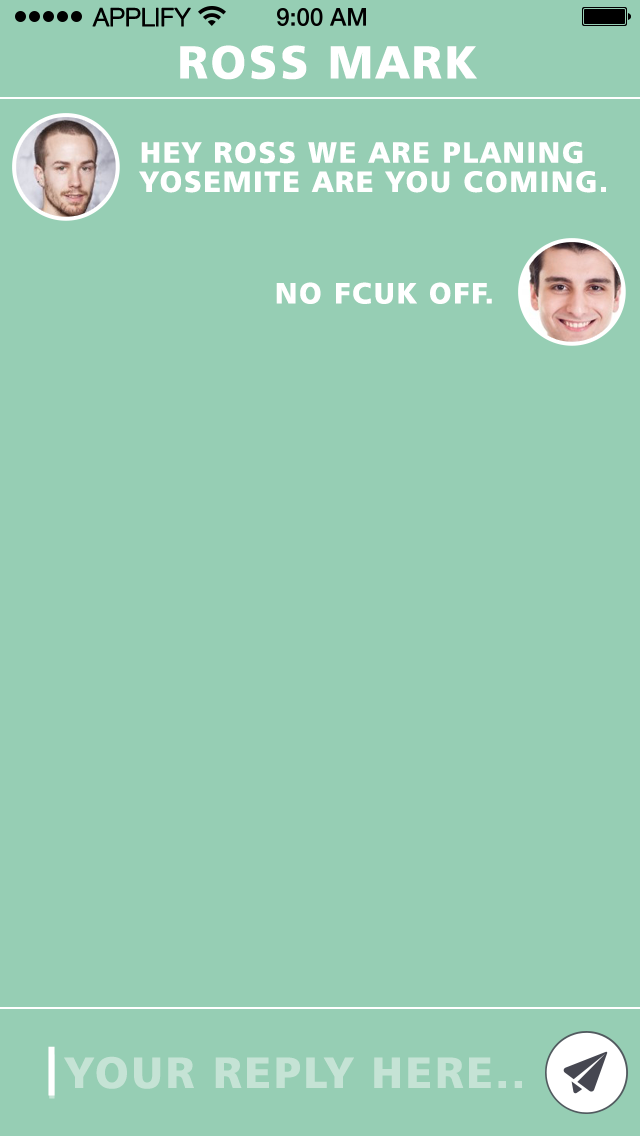
<style>
.page{position:relative;width:640px;height:1136px;background:#96ceb4}
.page>*{position:absolute;margin:0}
.t1{font:25px "HelveticaNeueLTCom-Lt";letter-spacing:-0.02em;color:#000000;font-weight:bold}
.t2{font:79.2px "Humanist777BT-BlackB";letter-spacing:0.06em;color:#ffffff}
.t3{font:50px/29.2px "Humanist777BT-BlackB";letter-spacing:0.06em;color:#ffffff}
.t4{font:12px/41.7px "Humanist777BT-BlackB";letter-spacing:0.06em;color:#ffffff}
.t5{font:83.3px "Humanist777BT-BlackB";letter-spacing:0.06em;color:#ffffff}
.t6{font:75px "Humanist777BT-BlackB";letter-spacing:0.06em;color:#c5e3d5}
</style>
<div class="page">
<p class="t1" style="left:92px;top:7px;width:99px;height:20px">APPLIFY</p>
<p class="t2" style="left:180px;top:45px;width:297px;height:35px">ROSS MARK</p>
<p class="t3" style="left:139px;top:141px;width:467px;height:52px;text-align:right">HEY ROSS WE ARE PLANING <br>YOSEMITE ARE YOU COMING.</p>
<p class="t4" style="left:276px;top:282px;width:216px;height:22px;text-align:right">NO FCUK OFF.</p>
<p class="t5" style="left:48px;top:1046px;width:7px;height:50px">|</p>
<p class="t6" style="left:49px;top:1054px;width:473px;height:45px">|YOUR REPLY HERE..</p>
</div>
